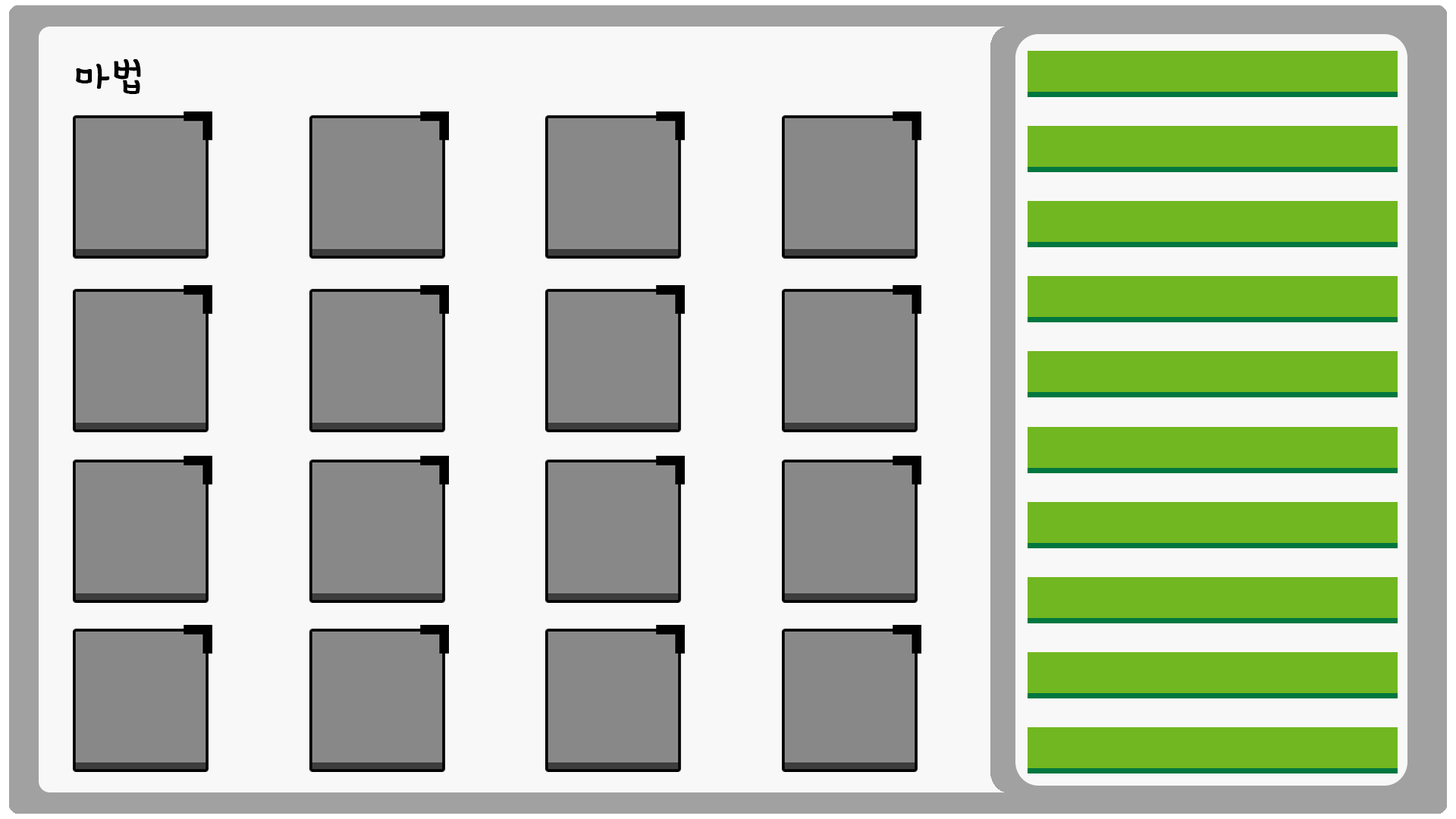
<style>
.page{position:relative;width:1456px;height:819px;background:#f8f8f8}
.page>*{position:absolute;margin:0}
.t1{font:45.5px "365uppercat";color:#010101;font-weight:bold}
</style>
<div class="page">
<p class="t1" style="left:76px;top:59px;width:65px;height:35px">마법</p>
</div>
